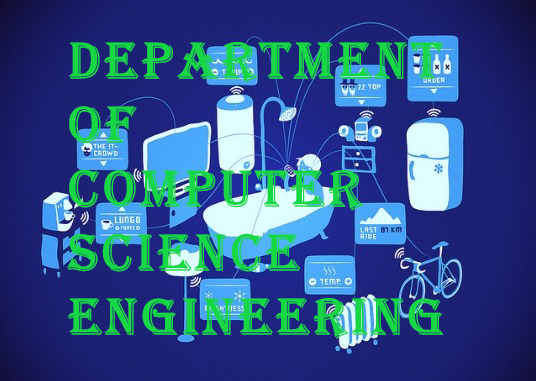
<style>
.page{position:relative;width:536px;height:381px}
.page>*{position:absolute;margin:0}
.t1{font:53.3px "Algerian";letter-spacing:0.05em;color:#18d745;font-weight:bold}
</style>
<div class="page">
<p class="t1" style="left:67px;top:42px;width:377px;height:297px">Department<br>of<br>Computer<br>Science<br>Engineering</p>
</div>
